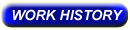
<style>
.page{position:relative;width:130px;height:30px}
.page>*{position:absolute;margin:0}
.t1{font:14px "Arial-BoldItalicMT";color:#fcfbf9}
</style>
<div class="page">
<p class="t1" style="left:12px;top:9px;width:111px;height:12px">WORK HISTORY</p>
</div>
